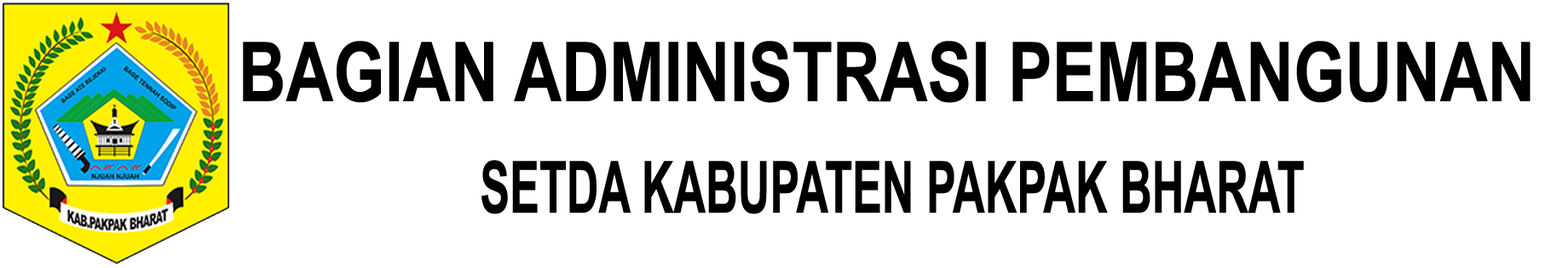
<style>
.page{position:relative;width:1568px;height:268px;background:#ffffff}
.page>*{position:absolute;margin:0}
.t1{font:82.8px "Arial-BoldMT";color:#000000;scale:0.8 1}
.t2{font:72.1px "Arial-BoldMT";color:#000000;scale:0.62 1}
</style>
<div class="page">
<p class="t1" style="left:243px;top:41px;width:1288px;height:62px">BAGIAN ADMINISTRASI PEMBANGUNAN</p>
<p class="t2" style="left:481px;top:160px;width:823px;height:55px">SETDA KABUPATEN PAKPAK BHARAT</p>
</div>
